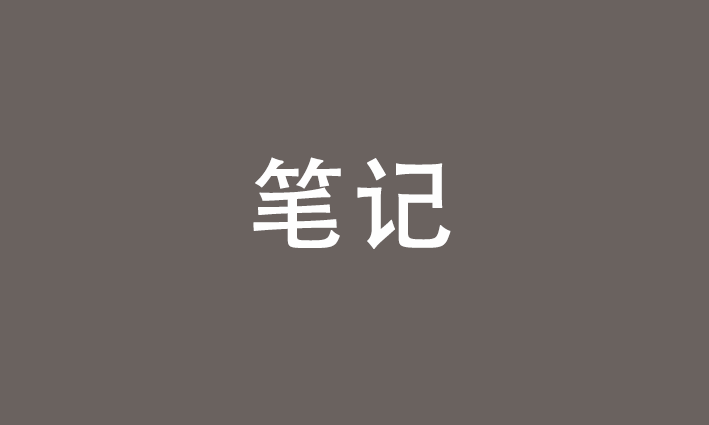
<style>
.page{position:relative;width:709px;height:425px;background:#6a625f}
.page>*{position:absolute;margin:0}
.t1{font:100px "AdobeHeitiStd-Regular";letter-spacing:0.04em;color:#fefefe;font-weight:bold}
</style>
<div class="page">
<p class="t1" style="left:253px;top:157px;width:198px;height:92px">笔记</p>
</div>
